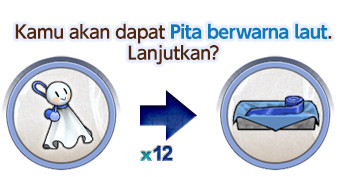
<style>
.page{position:relative;width:347px;height:177px;background:#ffffff}
.page>*{position:absolute;margin:0}
.t1{font:18px/21px "UDShinGoPro-Bold";letter-spacing:-0.04em;color:#0d7bba}
.t2{font:18px/21px "UDShinGoPro-DeBold";letter-spacing:-0.04em;color:#50260d}
</style>
<div class="page">
<p class="t1" style="left:15px;top:23px;width:317px;height:42px;text-align:center"><span class="t2">Kamu akan dapat </span>Pita berwarna laut<span class="t2">.<br>Lanjutkan?</span></p>
</div>
